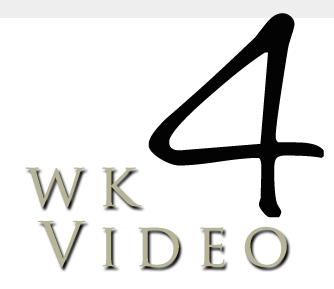
<style>
.page{position:relative;width:334px;height:289px;background:#ffffff}
.page>*{position:absolute;margin:0}
.t1{font:234.8px "Noteworthy-Light";letter-spacing:0.22em;color:#030303}
.t2{font:60px "TrajanPro-Regular";letter-spacing:0.22em;color:#b7b497}
</style>
<div class="page">
<p class="t1" style="left:148px;top:13px;width:176px;height:205px">4</p>
<p class="t2" style="left:25px;top:167px;width:117px;height:40px">wk</p>
<p class="t2" style="left:37px;top:220px;width:250px;height:48px">Video</p>
</div>
